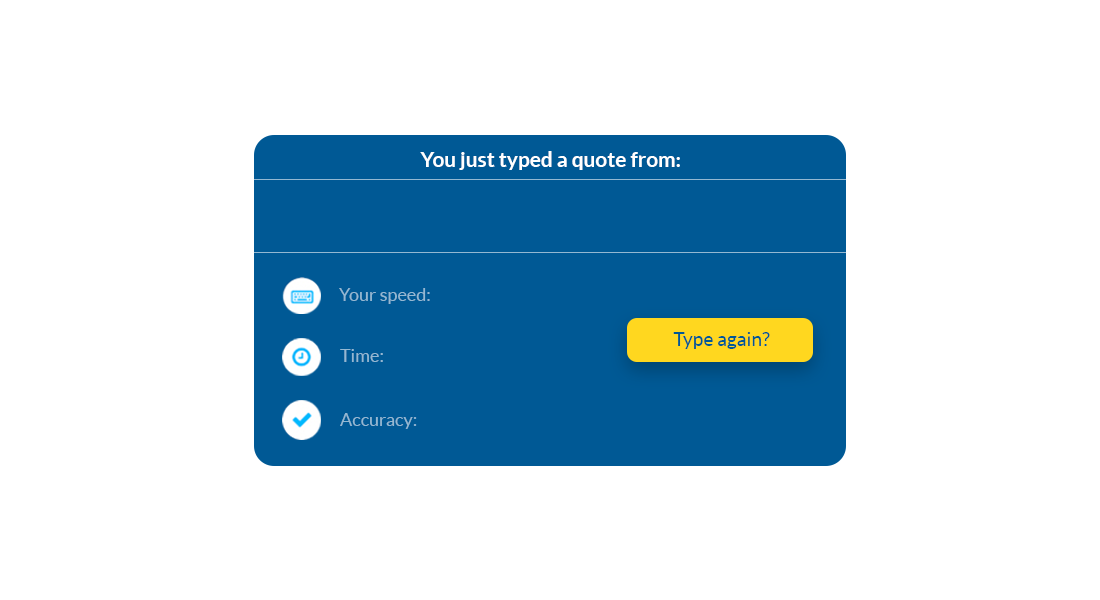
<style>
.page{position:relative;width:1100px;height:600px;background:#ffffff}
.page>*{position:absolute;margin:0}
.t1{font:20.8px "Lato-Bold";color:#ffffff}
.t2{font:18px "Lato-Regular";color:#94b8d2}
.t3{font:19.2px "Lato-Regular";color:#005894}
</style>
<div class="page">
<p class="t1" style="left:420px;top:151px;width:260px;height:19px">You just typed a quote from:</p>
<p class="t2" style="left:339px;top:288px;width:91px;height:16px">Your speed:</p>
<p class="t3" style="left:673px;top:332px;width:97px;height:17px">Type again?</p>
<p class="t2" style="left:340px;top:349px;width:43px;height:13px">Time:</p>
<p class="t2" style="left:340px;top:413px;width:77px;height:16px">Accuracy:</p>
</div>
